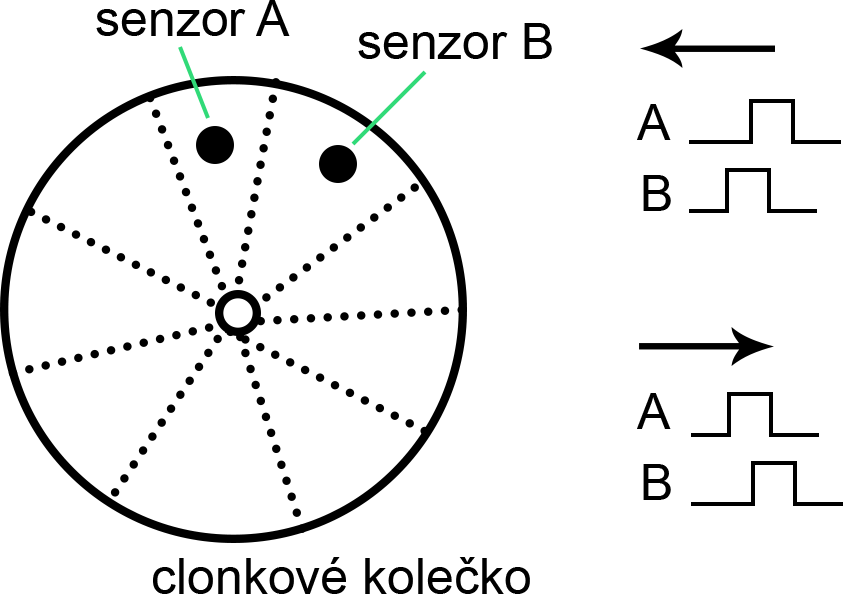
<style>
.page{position:relative;width:843px;height:594px;background:#ffffff}
.page>*{position:absolute;margin:0}
.t1{font:50px "ArialMT";color:#000000}
</style>
<div class="page">
<p class="t1" style="left:96px;top:0px;width:194px;height:36px">senzor A</p>
<p class="t1" style="left:358px;top:23px;width:194px;height:36px">senzor B</p>
<p class="t1" style="left:637px;top:104px;width:34px;height:36px">A</p>
<p class="t1" style="left:643px;top:175px;width:28px;height:36px">B</p>
<p class="t1" style="left:637px;top:393px;width:34px;height:36px">A</p>
<p class="t1" style="left:643px;top:464px;width:28px;height:36px">B</p>
<p class="t1" style="left:153px;top:557px;width:377px;height:37px">clonkové kolečko</p>
</div>
